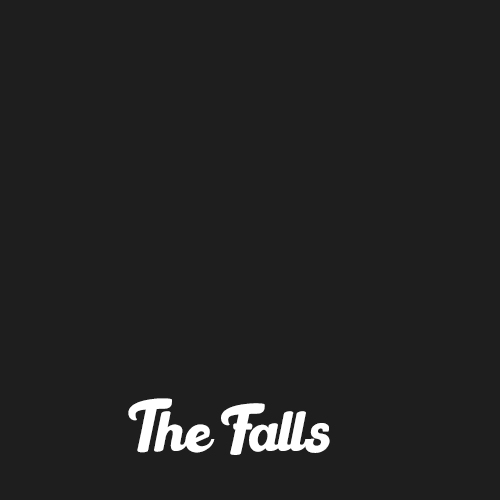
<style>
.page{position:relative;width:500px;height:500px;background:#1e1e1e}
.page>*{position:absolute;margin:0}
.t1{font:68.7px "LightBeachRegular";color:#ffffff}
</style>
<div class="page">
<p class="t1" style="left:128px;top:398px;width:202px;height:57px">The Falls</p>
</div>
